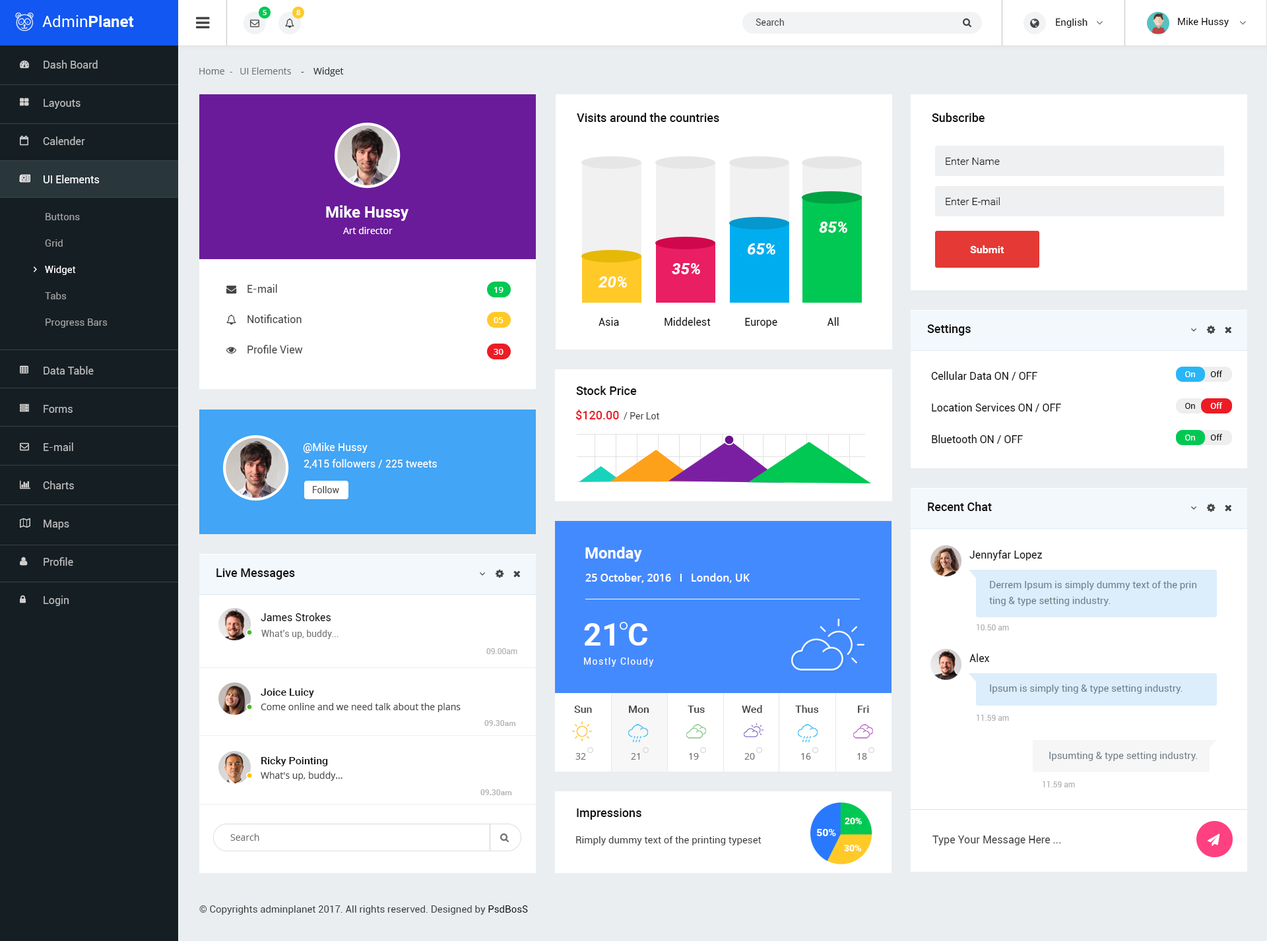
<style>
.page{position:relative;width:1267px;height:941px;background:#ffffff}
.page>*{position:absolute;margin:0}
.t1{font:7.3px "OpenSans-Semibold";color:#ffffff}
.t2{font:9.9px "Roboto-Regular";color:#111111}
.t3{font:9.2px "Roboto-Regular";color:#444444}
.t4{font:10.6px/38.3px "Roboto-Regular";color:#b9b9b9}
.t5{font:10.6px/38.3px "Roboto-Regular";color:#ffffff}
.t6{font:9.2px "OpenSans";color:#707070}
.t7{font:9.2px "OpenSans";color:#333333}
.t8{font:11.9px "Roboto-Medium";color:#111111}
.t9{font:10.6px "Roboto-Light";color:#111111}
.t10{font:15.8px "Roboto-Bold";color:#ffffff}
.t11{font:9.9px/26.4px "Roboto-Regular";color:#a0a0a0}
.t12{font:9.9px/26.4px "Roboto-Regular";color:#ffffff}
.t13{font:15.8px "Roboto-BoldItalic";color:#ffffff}
.t14{font:9.2px "OpenSans";color:#ffffff}
.t15{font:10.6px "Roboto-Bold";color:#ffffff}
.t16{font:10.6px/30.3px "Roboto-Regular";color:#444444}
.t17{font:8.6px "OpenSans-Semibold";color:#fffefe}
.t18{font:10.6px "Roboto-Regular";color:#111111}
.t19{font:10.6px/31.7px "Roboto-Regular";color:#111111}
.t20{font:8.6px "Roboto-Regular";color:#111111}
.t21{font:8.6px "Roboto-Regular";color:#ffffff}
.t22{font:11.9px "Roboto-Medium";color:#ed1c24}
.t23{font:10.6px "Roboto-Regular";color:#ffffff}
.t24{font:10.6px "OpenSans-Semibold";color:#ffffff}
.t25{font:9.9px/15.8px "Roboto-Regular";color:#72808b}
.t26{font:31.7px "Roboto-Bold";color:#ffffff}
.t27{font:7.9px "Roboto-Regular";color:#b1b1b1}
.t28{font:9.2px "Roboto-Regular";color:#707070}
.t29{font:7.9px "Roboto-Regular";color:#b0b0b0}
.t30{font:9.2px "Roboto-Regular";letter-spacing:0.1em;color:#ffffff}
.t31{font:10.6px "Roboto-Medium";color:#111111}
.t32{font:9.9px "Roboto-Regular";color:#72808b}
.t33{font:9.2px "OpenSans";color:#444444}
.t34{font:10.6px "Roboto-Medium";color:#444444}
.t35{font:7.9px "Roboto-Medium";color:#b0b0b0}
.t36{font:9.2px "Roboto-Bold";color:#ffffff}
.t37{font:9.9px "Roboto-Regular";color:#444444}
.t38{font:10.6px "Roboto-Regular";color:#444444}
</style>
<div class="page">
<p class="t1" style="left:263px;top:10px;width:4px;height:5px">5</p>
<p class="t1" style="left:296px;top:10px;width:4px;height:5px">8</p>
<p class="t2" style="left:1178px;top:18px;width:50px;height:9px">Mike Hussy</p>
<p class="t3" style="left:755px;top:18px;width:29px;height:8px">Search</p>
<p class="t2" style="left:1056px;top:18px;width:31px;height:10px">English</p>
<p class="t4" style="left:43px;top:60px;width:57px;height:546px">Dash Board<br>Layouts<br>Calender<br><span class="t5">UI Elements<br></span><br><br><br><br>Data Table<br>Forms<br>E-mail<br>Charts<br>Maps<br>Profile<br>Login</p>
<p class="t6" style="left:199px;top:67px;width:145px;height:10px">Home  -   UI Elements   <span class="t7"> -    Widget</span></p>
<p class="t8" style="left:577px;top:113px;width:142px;height:9px">Visits around the countries</p>
<p class="t8" style="left:932px;top:113px;width:52px;height:9px">Subscribe</p>
<p class="t9" style="left:945px;top:158px;width:54px;height:7px">Enter Name</p>
<p class="t9" style="left:945px;top:197px;width:54px;height:8px">Enter E-mail</p>
<p class="t10" style="left:326px;top:205px;width:82px;height:16px">Mike Hussy</p>
<p class="t11" style="left:45px;top:213px;width:63px;height:115px">Buttons<br>Grid<br><span class="t12">Widget<br></span>Tabs<br>Progress Bars</p>
<p class="t13" style="left:819px;top:222px;width:28px;height:11px">85%</p>
<p class="t14" style="left:343px;top:227px;width:50px;height:7px">Art director</p>
<p class="t13" style="left:747px;top:243px;width:28px;height:12px">65%</p>
<p class="t15" style="left:970px;top:245px;width:34px;height:8px">Submit</p>
<p class="t13" style="left:672px;top:263px;width:28px;height:11px">35%</p>
<p class="t13" style="left:598px;top:276px;width:29px;height:12px">20%</p>
<p class="t16" style="left:247px;top:284px;width:56px;height:70px">E-mail <br>Notification<br>Profile View</p>
<p class="t17" style="left:494px;top:287px;width:9px;height:6px">19</p>
<p class="t17" style="left:493px;top:317px;width:10px;height:6px">05</p>
<p class="t18" style="left:598px;top:317px;width:240px;height:11px">Asia                 Middelest             Europe                   All</p>
<p class="t8" style="left:927px;top:325px;width:43px;height:11px">Settings</p>
<p class="t17" style="left:493px;top:349px;width:10px;height:6px">30</p>
<p class="t19" style="left:931px;top:371px;width:130px;height:73px">Cellular Data ON / OFF<br>Location Services ON / OFF<br>Bluetooth ON / OFF</p>
<p class="t20" style="left:1185px;top:371px;width:37px;height:6px"><span class="t21">On       </span>Off</p>
<p class="t8" style="left:576px;top:386px;width:61px;height:9px">Stock Price</p>
<p class="t22" style="left:575px;top:410px;width:44px;height:11px">$120.00</p>
<p class="t3" style="left:623px;top:412px;width:36px;height:8px">/ Per Lot</p>
<p class="t21" style="left:1185px;top:402px;width:37px;height:7px"><span class="t20">On </span>      Off</p>
<p class="t20" style="left:1185px;top:434px;width:37px;height:7px"><span class="t21">On       </span>Off</p>
<p class="t23" style="left:303px;top:443px;width:64px;height:10px">@Mike Hussy</p>
<p class="t23" style="left:304px;top:459px;width:133px;height:10px">2,415 followers / 225 tweets</p>
<p class="t3" style="left:313px;top:486px;width:26px;height:7px">Follow</p>
<p class="t8" style="left:928px;top:502px;width:64px;height:9px">Recent Chat</p>
<p class="t10" style="left:585px;top:547px;width:57px;height:15px">Monday</p>
<p class="t18" style="left:969px;top:550px;width:73px;height:11px">Jennyfar Lopez</p>
<p class="t8" style="left:216px;top:569px;width:79px;height:11px">Live Messages</p>
<p class="t24" style="left:585px;top:573px;width:164px;height:10px">25 October, 2016   I   London, UK</p>
<p class="t25" style="left:989px;top:581px;width:208px;height:25px">Derrem Ipsum is simply dummy text of the prin<br>ting &amp; type setting industry.</p>
<p class="t18" style="left:261px;top:613px;width:70px;height:8px">James Strokes</p>
<p class="t26" style="left:584px;top:623px;width:63px;height:23px">21 C</p>
<p class="t27" style="left:976px;top:624px;width:33px;height:7px">10.50 am</p>
<p class="t28" style="left:261px;top:630px;width:77px;height:9px">What's up, buddy...</p>
<p class="t29" style="left:486px;top:648px;width:31px;height:6px">09.00am</p>
<p class="t18" style="left:969px;top:654px;width:20px;height:8px">Alex</p>
<p class="t30" style="left:584px;top:658px;width:69px;height:9px">Mostly Cloudy</p>
<p class="t31" style="left:261px;top:689px;width:53px;height:9px">Joice Luicy</p>
<p class="t32" style="left:990px;top:685px;width:192px;height:9px">Ipsum is simply ting &amp; type setting industry.</p>
<p class="t33" style="left:261px;top:703px;width:199px;height:9px">Come online and we need talk about the plans</p>
<p class="t34" style="left:574px;top:706px;width:18px;height:7px">Sun</p>
<p class="t34" style="left:629px;top:706px;width:20px;height:7px">Mon</p>
<p class="t34" style="left:687px;top:706px;width:18px;height:7px">Tus</p>
<p class="t34" style="left:742px;top:705px;width:20px;height:8px">Wed</p>
<p class="t34" style="left:795px;top:705px;width:24px;height:8px">Thus</p>
<p class="t34" style="left:858px;top:706px;width:11px;height:7px">Fri</p>
<p class="t35" style="left:484px;top:720px;width:32px;height:6px">09.30am</p>
<p class="t27" style="left:976px;top:714px;width:33px;height:7px">11.59 am</p>
<p class="t31" style="left:261px;top:757px;width:67px;height:10px">Ricky Pointing</p>
<p class="t6" style="left:575px;top:753px;width:11px;height:7px">32</p>
<p class="t6" style="left:631px;top:753px;width:8px;height:7px">21</p>
<p class="t6" style="left:689px;top:753px;width:10px;height:7px">19</p>
<p class="t6" style="left:744px;top:753px;width:11px;height:7px">20</p>
<p class="t6" style="left:801px;top:753px;width:10px;height:7px">16</p>
<p class="t6" style="left:857px;top:753px;width:10px;height:7px">18</p>
<p class="t32" style="left:1049px;top:752px;width:148px;height:9px">Ipsumting &amp; type setting industry.</p>
<p class="t33" style="left:261px;top:772px;width:81px;height:9px">What's up, buddy...</p>
<p class="t27" style="left:1042px;top:781px;width:33px;height:7px">11.59 am</p>
<p class="t35" style="left:480px;top:790px;width:32px;height:6px">09.30am</p>
<p class="t8" style="left:577px;top:809px;width:64px;height:11px">Impressions</p>
<p class="t36" style="left:844px;top:818px;width:18px;height:7px">20%</p>
<p class="t6" style="left:230px;top:834px;width:29px;height:7px">Search</p>
<p class="t15" style="left:816px;top:829px;width:20px;height:8px">50%</p>
<p class="t37" style="left:576px;top:837px;width:185px;height:9px">Rimply dummy text of the printing typeset</p>
<p class="t36" style="left:844px;top:845px;width:17px;height:7px">30%</p>
<p class="t38" style="left:932px;top:836px;width:129px;height:10px">Type Your Message Here ...</p>
<p class="t37" style="left:199px;top:906px;width:329px;height:9px">© Copyrights adminplanet 2017. All rights reserved. Designed by <span class="t2">PsdBosS</span></p>
</div>
